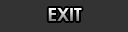
<style>
.page{position:relative;width:128px;height:32px;background:#333333}
.page>*{position:absolute;margin:0}
.t1{font:18px "CenturyGothic-Bold"}
</style>
<div class="page">
<p class="t1" style="left:48px;top:8px;width:34px;height:13px">EXIT</p>
</div>
